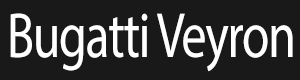
<style>
.page{position:relative;width:300px;height:80px;background:#191919}
.page>*{position:absolute;margin:0}
.t1{font:64.1px "MyriadPro-Regular";letter-spacing:-0.025em;color:#ffffff;scale:0.78 1}
</style>
<div class="page">
<p class="t1" style="left:10px;top:13px;width:283px;height:59px">Bugatti Veyron</p>
</div>
